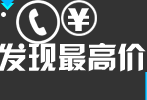
<style>
.page{position:relative;width:147px;height:100px;background:#333333}
.page>*{position:absolute;margin:0}
.t1{font:31.4px "FZCCHK--GBK1-0";color:#ffffff}
.t2{font:30px "HYk2gj";color:#ffffff}
</style>
<div class="page">
<p class="t1" style="left:68px;top:8px;width:21px;height:23px">￥</p>
<p class="t2" style="left:0px;top:43px;width:146px;height:29px">发现最高价</p>
</div>
